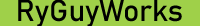
<style>
.page{position:relative;width:200px;height:26px;background:#9fd049}
.page>*{position:absolute;margin:0}
.t1{font:30px "Bahnschrift";color:#000000}
</style>
<div class="page">
<p class="t1" style="left:18px;top:0px;width:164px;height:28px">RyGuyWorks</p>
</div>
